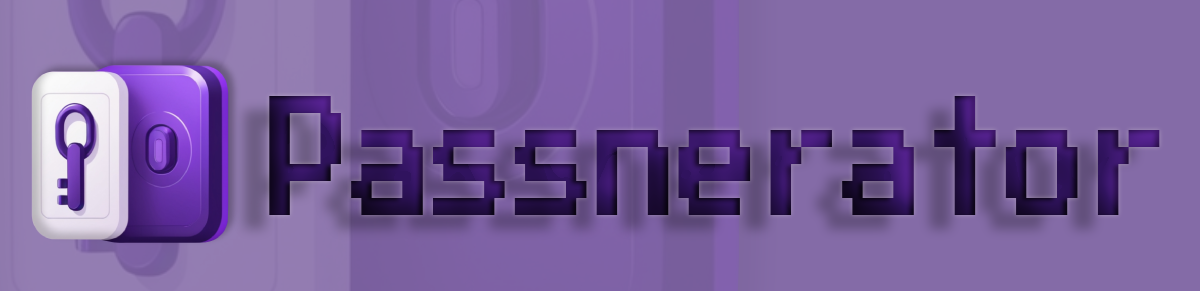
<style>
.page{position:relative;width:1200px;height:291px;background:#846ba7}
.page>*{position:absolute;margin:0}
.t1{font:136px "PressStart2P-Regular";scale:0.6 1}
</style>
<div class="page">
<p class="t1" style="left:269px;top:96px;width:891px;height:119px">Passnerator</p>
</div>
